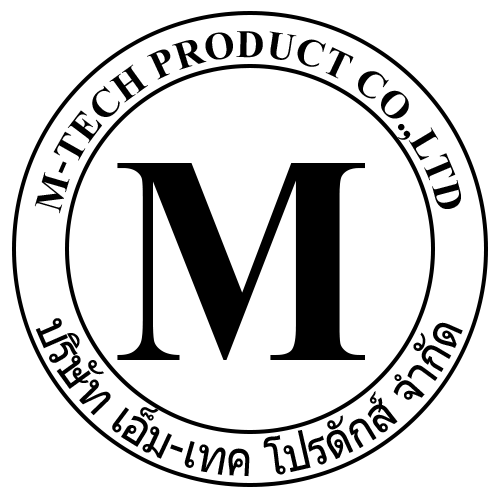
<style>
.page{position:relative;width:500px;height:500px;background:#ffffff}
.page>*{position:absolute;margin:0}
.t1{font:59.4px "AngsanaNew-Bold";color:#000000}
.t2{font:450.1px "AngsanaNew-Bold";color:#000000;scale:0.92 1}
.t3{font:47.9px "Tahoma";color:#000000;scale:0.92 1}
</style>
<div class="page">
<p class="t1" style="left:34px;top:31px;width:427px;height:183px;text-align:center">M-TECH PRODUCT CO.,LTD</p>
<p class="t2" style="left:117px;top:163px;width:248px;height:197px">M</p>
<p class="t3" style="left:35px;top:318px;width:428px;height:159px;text-align:center">บริษัท เอ็ม-เทค โปรดักส์ จำกัด</p>
</div>
